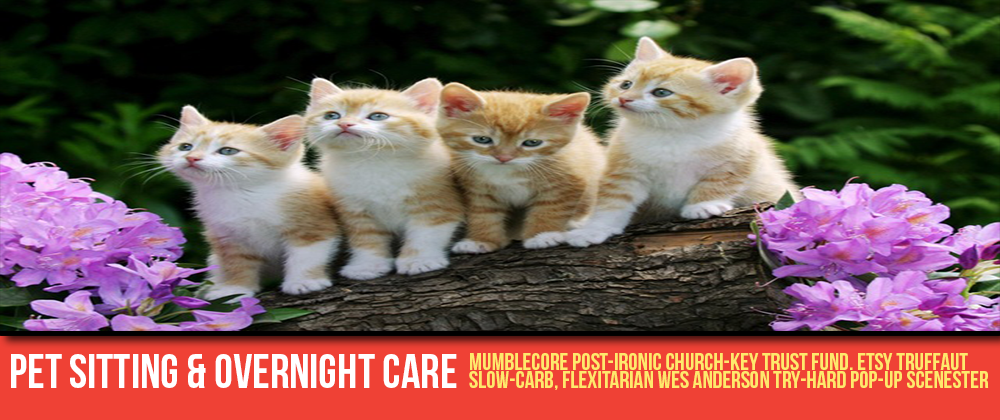
<style>
.page{position:relative;width:1000px;height:420px}
.page>*{position:absolute;margin:0}
.t1{font:24px/18px "BebasNeue";color:#fee96c}
.t2{font:48px "BebasNeue";color:#ffffff}
</style>
<div class="page">
<p class="t1" style="left:469px;top:353px;width:520px;height:37px;text-align:right">Mumblecore post-ironic church-key trust fund. Etsy Truffaut<br>slow-carb, flexitarian Wes Anderson try-hard pop-up scenester</p>
<p class="t2" style="left:11px;top:354px;width:446px;height:34px">pet sitting &amp; overnight care</p>
</div>
